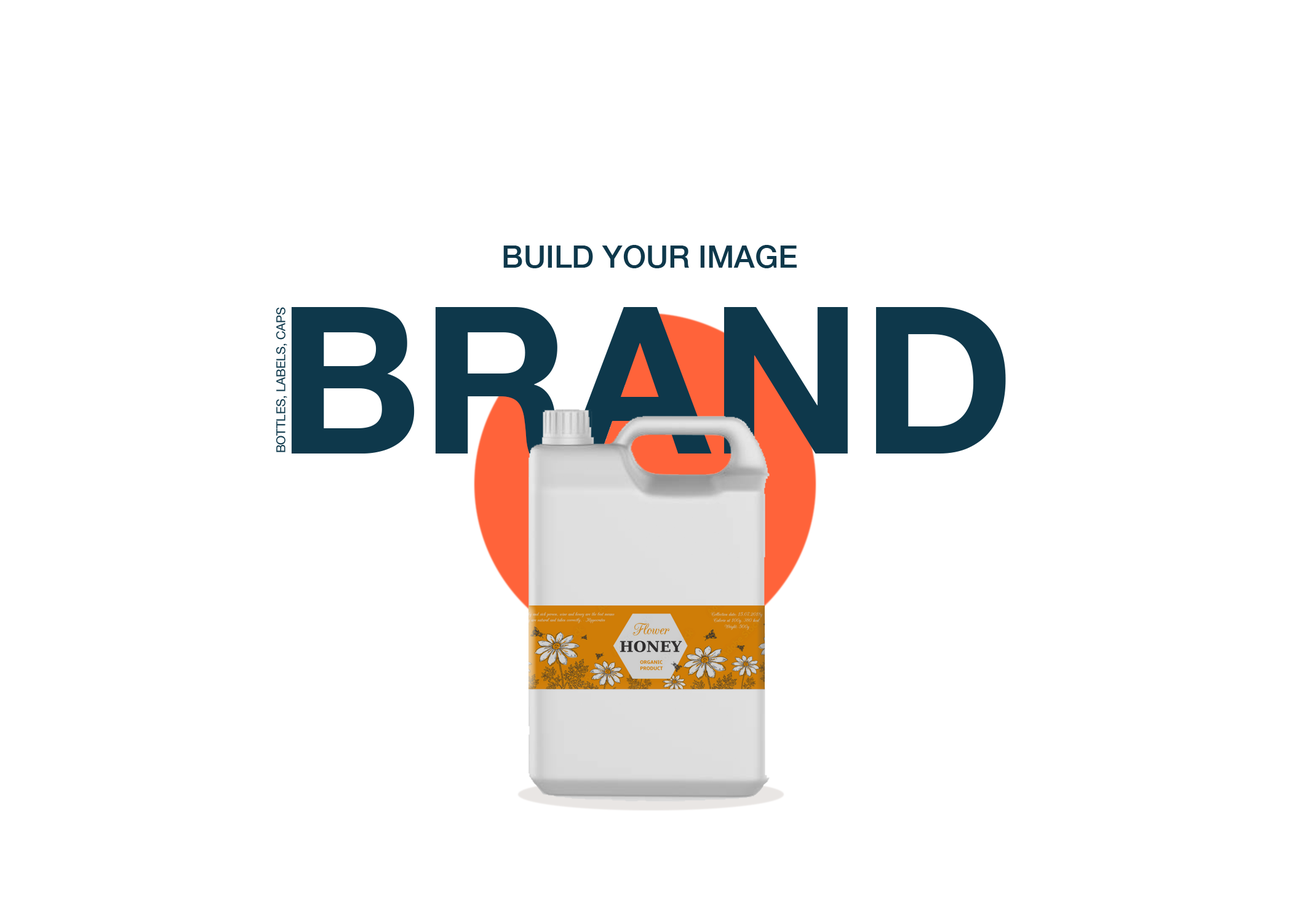
<style>
.page{position:relative;width:1292px;height:923px;background:#ffffff}
.page>*{position:absolute;margin:0}
.t1{font:30.8px "HelveticaNeue-Medium";color:#0e384b}
.t2{font:12.3px "HelveticaNeue";color:#0e384b}
.t3{font:205.1px "HelveticaNeue-Bold";color:#0e384b}
</style>
<div class="page">
<p class="t1" style="left:503px;top:245px;width:294px;height:23px">BUILD YOUR IMAGE</p>
<p class="t2" style="left:276px;top:307px;width:11px;height:145px;rotate:-90deg">BOTTLES, LABELS, CAPS</p>
<p class="t3" style="left:291px;top:307px;width:715px;height:146px">BRAND</p>
</div>
